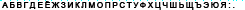
<style>
.page{position:relative;width:245px;height:10px;background:#ffffff}
.page>*{position:absolute;margin:0}
.t1{font:8.2px "ArialMT";letter-spacing:0.175em;color:#000000;font-weight:bold}
.t2{font:8.2px "ArialMT";letter-spacing:0.255em;color:#000000;font-weight:bold}
.t3{font:8.2px "ArialMT";letter-spacing:0.195em;color:#000000;font-weight:bold}
</style>
<div class="page">
<p class="t1" style="left:2px;top:1px;width:233px;height:9px">АБВ<span class="t2">ГД</span>ЕЁЖЗИКЛМОПРСТУФХЦЧШЬЩЪЭЮ<span class="t3">Я:.</span></p>
</div>
